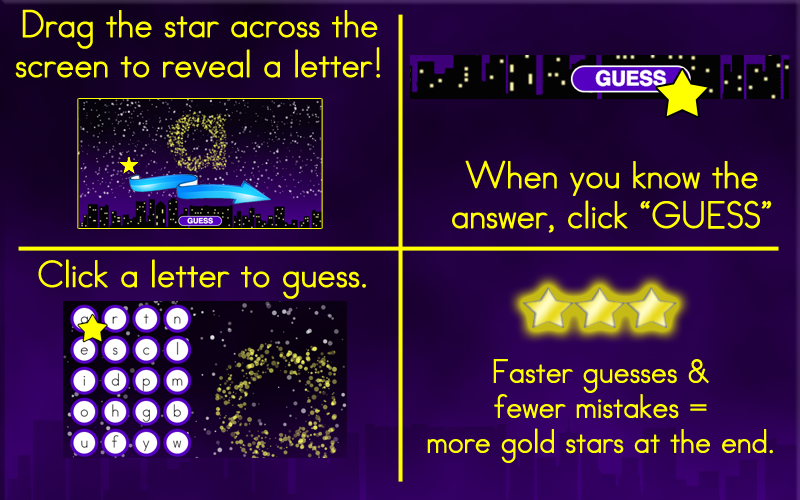
<style>
.page{position:relative;width:800px;height:500px}
.page>*{position:absolute;margin:0}
.t1{font:33.3px "AbcPrint";color:#ffff00;font-weight:bold}
.t2{font:29.2px "AbcPrint";color:#ffff00;font-weight:bold}
</style>
<div class="page">
<p class="t1" style="left:15px;top:9px;width:366px;height:69px;text-align:center">Drag the star across the <br>screen to reveal a letter!</p>
<p class="t1" style="left:452px;top:160px;width:320px;height:73px;text-align:center">When you know the answer, click “GUESS”</p>
<p class="t1" style="left:38px;top:259px;width:328px;height:40px">Click a letter to guess.</p>
<p class="t2" style="left:427px;top:359px;width:346px;height:104px;text-align:center">Faster guesses &amp; <br>fewer mistakes = <br>more gold stars at the end.</p>
</div>
